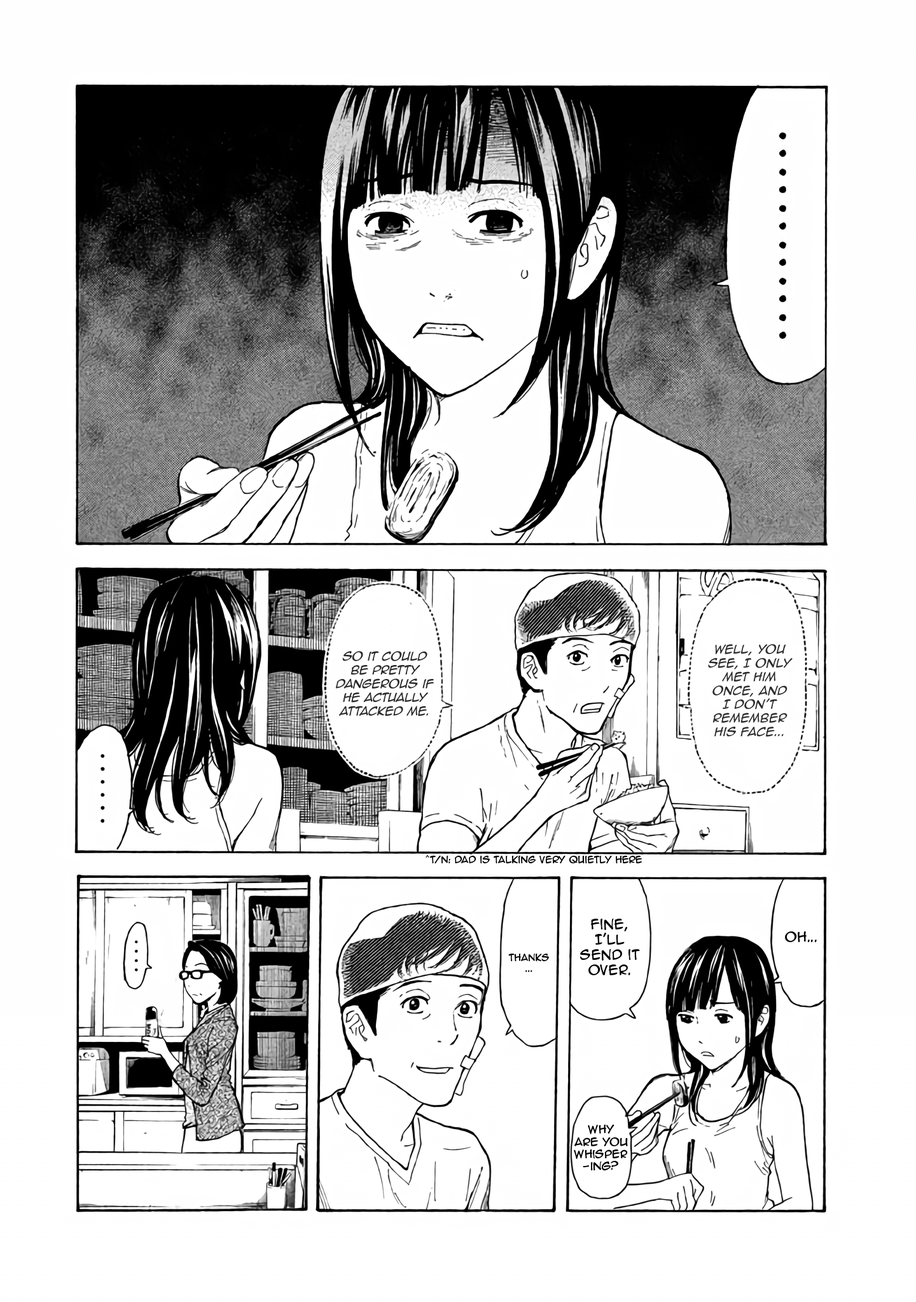
<style>
.page{position:relative;width:916px;height:1302px;background:#ffffff}
.page>*{position:absolute;margin:0}
.t1{font:11.4px "AnimeAce2.0BB-Italic";color:#2a2a2a}
.t2{font:11.4px "AnimeAce2.0BB-Italic";color:#2c2c2c}
.t3{font:8.9px "AnimeAce2.0BB";color:#000000}
.t4{font:12.7px "AnimeAce2.0BB";color:#000000}
.t5{font:10.2px "AnimeAce2.0BB";color:#000000}
</style>
<div class="page">
<p class="t1" style="left:336px;top:651px;width:98px;height:65px;text-align:center">so it could be pretty dangerous if he actually attacked me.</p>
<p class="t2" style="left:708px;top:644px;width:84px;height:93px;text-align:center">Well, you see, I only met him once, and I don’t remember his face...</p>
<p class="t3" style="left:425px;top:855px;width:217px;height:9px">^T/N: Dad is talking very quietly here</p>
<p class="t4" style="left:580px;top:919px;width:60px;height:56px;text-align:center">Fine, I’ll send it over.</p>
<p class="t4" style="left:785px;top:932px;width:31px;height:10px">Oh...</p>
<p class="t3" style="left:508px;top:954px;width:41px;height:18px;text-align:center">Thanks<br>...</p>
<p class="t5" style="left:574px;top:1125px;width:54px;height:46px;text-align:center">Why are you whisper-ing?</p>
</div>
